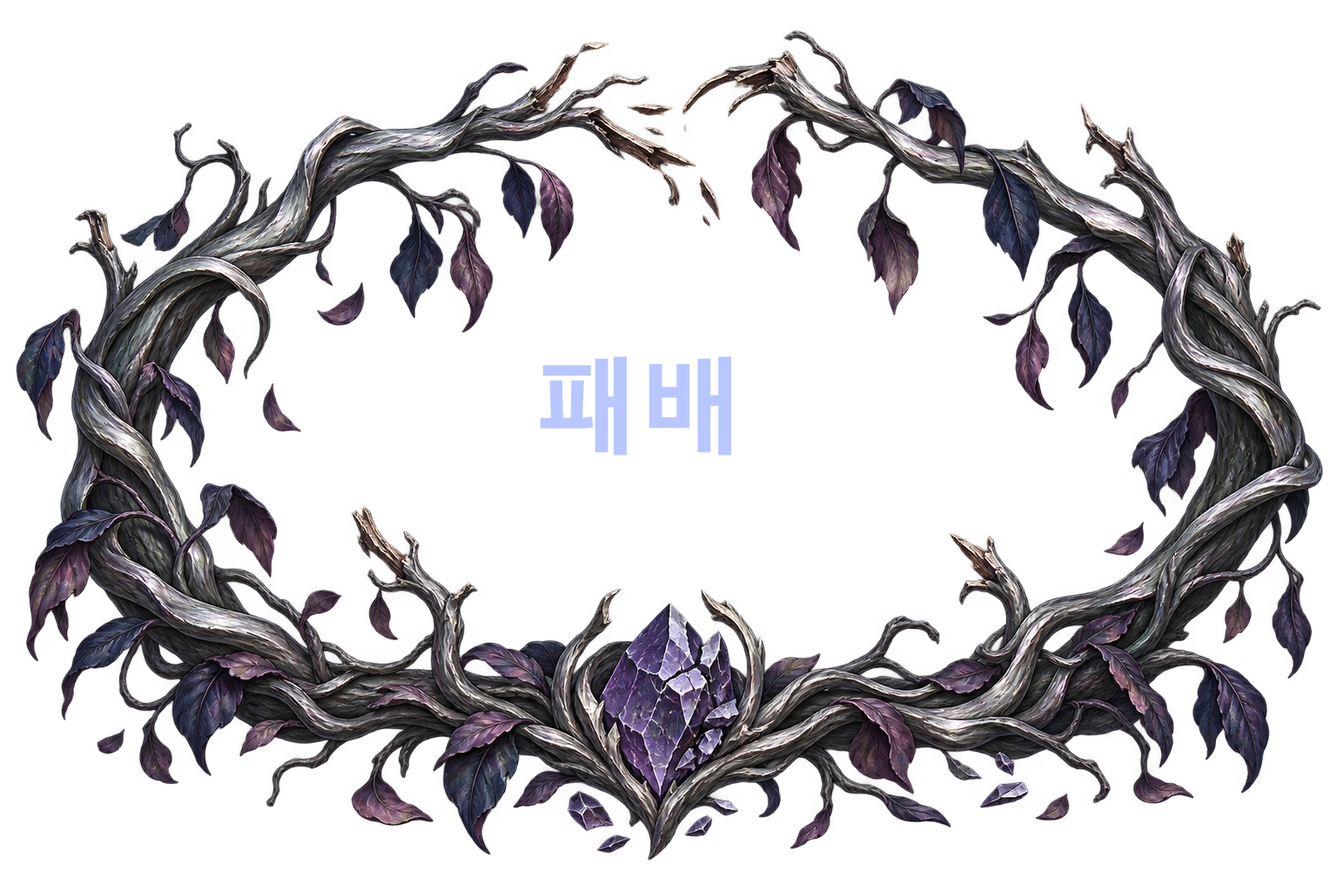
<style>
.page{position:relative;width:1337px;height:892px;background:#ffffff}
.page>*{position:absolute;margin:0}
.t1{font:104.5px "MalgunGothicBold";color:#b8c7ff}
</style>
<div class="page">
<p class="t1" style="left:540px;top:356px;width:191px;height:99px">패배</p>
</div>
